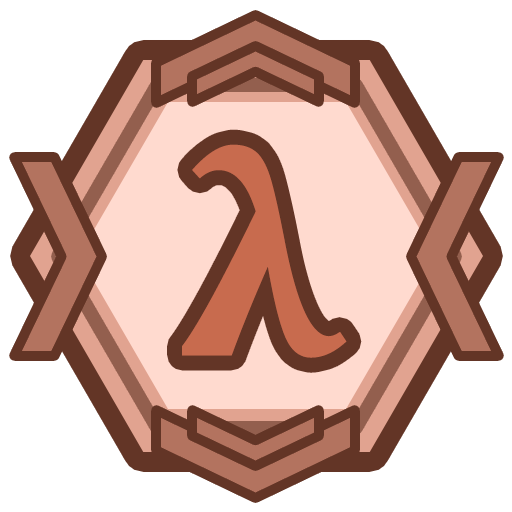
<style>
.page{position:relative;width:512px;height:512px;background:#ffffff}
.page>*{position:absolute;margin:0}
.t1{font:300px "Cambria-Bold";color:#c86b4e}
</style>
<div class="page">
<p class="t1" style="left:182px;top:144px;width:165px;height:214px">λ</p>
</div>
